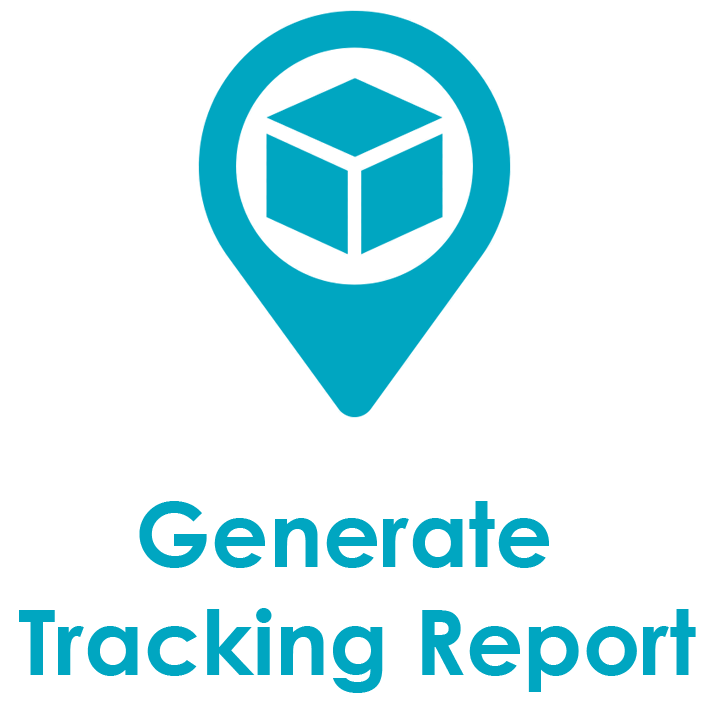
<style>
.page{position:relative;width:719px;height:719px;background:#ffffff}
.page>*{position:absolute;margin:0}
.t1{font:90px "CenturyGothic-Bold";color:#00a6c1}
</style>
<div class="page">
<p class="t1" style="left:19px;top:501px;width:677px;height:192px;text-align:center">Generate <br>Tracking Report</p>
</div>
